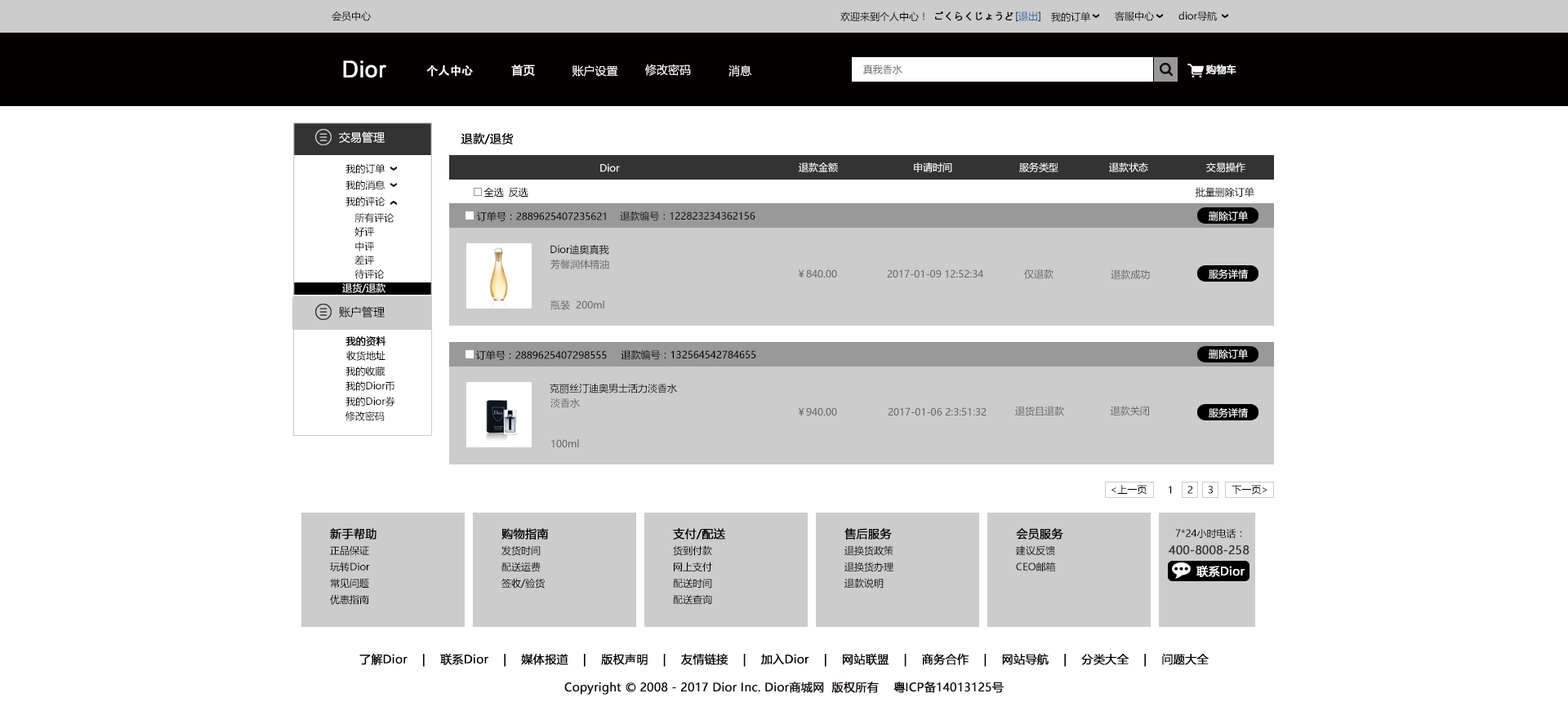
<style>
.page{position:relative;width:1568px;height:702px;background:#ffffff}
.page>*{position:absolute;margin:0}
.t1{font:9.8px "MicrosoftYaHei";color:#040000}
.t2{font:9.8px "MicrosoftYaHei";color:#040000;font-weight:bold}
.t3{font:9.8px "MicrosoftYaHei";color:#2a62ae}
.t4{font:22.9px "ArialMT";color:#ffffff;font-weight:bold}
.t5{font:11.4px "AdobeHeitiStd-Regular";color:#ffffff;font-weight:bold}
.t6{font:11.4px "MicrosoftYaHei";color:#ffffff;font-weight:bold}
.t7{font:11.4px "MicrosoftYaHei";color:#ffffff}
.t8{font:9.8px "MicrosoftYaHei";color:#666666}
.t9{font:9.8px "MicrosoftYaHei";color:#ffffff;font-weight:bold}
.t10{font:11.4px "MicrosoftYaHei";color:#000000;font-weight:bold}
.t11{font:9.8px "MicrosoftYaHei";color:#ffffff}
.t12{font:9.8px "MicrosoftYaHei";color:#000000}
.t13{font:11.4px "MicrosoftYaHei";color:#040000}
.t14{font:9.8px "MicrosoftYaHei";color:#060001;font-weight:bold}
.t15{font:9.8px "MicrosoftYaHei";color:#060001}
.t16{font:11.4px "MicrosoftYaHei";color:#040000;font-weight:bold}
.t17{font:11.4px "MicrosoftYaHei";color:#333333;font-weight:bold}
</style>
<div class="page">
<p class="t1" style="left:332px;top:11px;width:39px;height:10px">会员中心</p>
<p class="t1" style="left:840px;top:11px;width:84px;height:11px">欢迎来到个人中心！</p>
<p class="t2" style="left:935px;top:11px;width:78px;height:10px">ごくらくじょうど</p>
<p class="t3" style="left:1016px;top:11px;width:24px;height:10px"><span class="t1">[</span>退出<span class="t1">]</span></p>
<p class="t1" style="left:1051px;top:11px;width:39px;height:11px">我的订单</p>
<p class="t1" style="left:1115px;top:11px;width:39px;height:10px">客服中心</p>
<p class="t1" style="left:1178px;top:11px;width:39px;height:10px">dior导航</p>
<p class="t4" style="left:343px;top:60px;width:43px;height:18px">Dior</p>
<p class="t5" style="left:426px;top:65px;width:47px;height:12px">个人中心</p>
<p class="t6" style="left:511px;top:65px;width:24px;height:11px">首页</p>
<p class="t7" style="left:572px;top:65px;width:46px;height:12px">账户设置</p>
<p class="t7" style="left:645px;top:64px;width:46px;height:12px">修改密码</p>
<p class="t7" style="left:728px;top:65px;width:24px;height:12px">消息</p>
<p class="t8" style="left:863px;top:65px;width:39px;height:9px">真我香水</p>
<p class="t9" style="left:1205px;top:65px;width:31px;height:10px">购物车</p>
<p class="t7" style="left:339px;top:131px;width:46px;height:12px">交易管理</p>
<p class="t10" style="left:461px;top:133px;width:53px;height:12px">退款/退货</p>
<p class="t1" style="left:345px;top:163px;width:40px;height:11px">我的订单</p>
<p class="t11" style="left:600px;top:163px;width:20px;height:9px">Dior</p>
<p class="t11" style="left:799px;top:163px;width:39px;height:9px">退款金额</p>
<p class="t11" style="left:914px;top:163px;width:38px;height:9px">申请时间</p>
<p class="t11" style="left:1019px;top:163px;width:39px;height:9px">服务类型</p>
<p class="t11" style="left:1109px;top:163px;width:39px;height:9px">退款状态</p>
<p class="t11" style="left:1206px;top:163px;width:39px;height:9px">交易操作</p>
<p class="t1" style="left:345px;top:180px;width:40px;height:10px">我的消息</p>
<p class="t1" style="left:345px;top:197px;width:40px;height:10px">我的评论</p>
<p class="t12" style="left:483px;top:187px;width:21px;height:10px">全选</p>
<p class="t12" style="left:509px;top:187px;width:19px;height:11px">反选</p>
<p class="t12" style="left:1195px;top:187px;width:59px;height:11px">批量删除订单</p>
<p class="t1" style="left:354px;top:213px;width:40px;height:10px">所有评论</p>
<p class="t12" style="left:477px;top:212px;width:129px;height:9px">订单号：2889625407235621</p>
<p class="t12" style="left:620px;top:212px;width:135px;height:9px">退款编号：122823234362156</p>
<p class="t11" style="left:1209px;top:211px;width:39px;height:10px">删除订单</p>
<p class="t1" style="left:354px;top:227px;width:20px;height:10px">好评</p>
<p class="t1" style="left:355px;top:242px;width:19px;height:10px">中评</p>
<p class="t12" style="left:550px;top:245px;width:59px;height:10px">Dior迪奥真我</p>
<p class="t1" style="left:354px;top:255px;width:20px;height:10px">差评</p>
<p class="t1" style="left:354px;top:270px;width:31px;height:9px">待评论</p>
<p class="t8" style="left:550px;top:260px;width:59px;height:10px">芳馨润体精油</p>
<p class="t8" style="left:798px;top:270px;width:39px;height:8px">￥840.00</p>
<p class="t8" style="left:887px;top:270px;width:96px;height:8px">2017-01-09 12:52:34</p>
<p class="t8" style="left:1024px;top:270px;width:30px;height:9px">仅退款</p>
<p class="t8" style="left:1111px;top:270px;width:39px;height:9px">退款成功</p>
<p class="t11" style="left:1209px;top:269px;width:39px;height:10px">服务详情</p>
<p class="t11" style="left:342px;top:283px;width:43px;height:10px">退货/退款</p>
<p class="t8" style="left:550px;top:301px;width:54px;height:9px">瓶装  200ml</p>
<p class="t13" style="left:339px;top:306px;width:46px;height:12px">账户管理</p>
<p class="t14" style="left:345px;top:336px;width:41px;height:10px">我的资料</p>
<p class="t15" style="left:346px;top:351px;width:39px;height:10px">收货地址</p>
<p class="t12" style="left:476px;top:350px;width:131px;height:10px">订单号：2889625407298555</p>
<p class="t12" style="left:621px;top:350px;width:135px;height:10px">退款编号：132564542784655</p>
<p class="t11" style="left:1209px;top:349px;width:39px;height:10px">删除订单</p>
<p class="t15" style="left:345px;top:367px;width:40px;height:9px">我的收藏</p>
<p class="t15" style="left:345px;top:381px;width:49px;height:10px">我的Dior币</p>
<p class="t12" style="left:550px;top:384px;width:127px;height:10px">克丽丝汀迪奥男士活力淡香水</p>
<p class="t15" style="left:345px;top:397px;width:50px;height:10px">我的Dior券</p>
<p class="t8" style="left:550px;top:399px;width:30px;height:9px">淡香水</p>
<p class="t15" style="left:345px;top:412px;width:40px;height:9px">修改密码</p>
<p class="t8" style="left:798px;top:408px;width:39px;height:8px">￥940.00</p>
<p class="t8" style="left:888px;top:408px;width:99px;height:8px">2017-01-06 2:3:51:32</p>
<p class="t8" style="left:1015px;top:406px;width:49px;height:10px">退货且退款</p>
<p class="t8" style="left:1110px;top:406px;width:39px;height:10px">退款关闭</p>
<p class="t11" style="left:1209px;top:408px;width:39px;height:10px">服务详情</p>
<p class="t8" style="left:551px;top:439px;width:28px;height:9px">100ml</p>
<p class="t12" style="left:1111px;top:485px;width:36px;height:10px">&lt;上一页</p>
<p class="t12" style="left:1169px;top:486px;width:3px;height:8px">1</p>
<p class="t12" style="left:1187px;top:486px;width:6px;height:8px">2</p>
<p class="t12" style="left:1208px;top:486px;width:5px;height:8px">3</p>
<p class="t12" style="left:1232px;top:485px;width:35px;height:10px">下一页&gt;</p>
<p class="t16" style="left:330px;top:528px;width:46px;height:12px">新手帮助</p>
<p class="t16" style="left:501px;top:528px;width:48px;height:12px">购物指南</p>
<p class="t16" style="left:673px;top:528px;width:52px;height:12px">支付/配送</p>
<p class="t16" style="left:844px;top:528px;width:48px;height:12px">售后服务</p>
<p class="t16" style="left:1016px;top:528px;width:47px;height:12px">会员服务</p>
<p class="t1" style="left:1175px;top:528px;width:67px;height:11px">7*24小时电话：</p>
<p class="t1" style="left:501px;top:546px;width:40px;height:10px">发货时间</p>
<p class="t1" style="left:673px;top:546px;width:39px;height:10px">货到付款</p>
<p class="t1" style="left:844px;top:546px;width:49px;height:10px">退换货政策</p>
<p class="t1" style="left:1016px;top:546px;width:39px;height:10px">建议反馈</p>
<p class="t17" style="left:1169px;top:546px;width:81px;height:9px">400-8008-258</p>
<p class="t1" style="left:330px;top:546px;width:39px;height:10px">正品保证</p>
<p class="t1" style="left:330px;top:562px;width:40px;height:10px">玩转Dior</p>
<p class="t1" style="left:501px;top:562px;width:40px;height:10px">配送运费</p>
<p class="t1" style="left:674px;top:562px;width:38px;height:10px">网上支付</p>
<p class="t1" style="left:844px;top:562px;width:49px;height:10px">退换货办理</p>
<p class="t1" style="left:1016px;top:562px;width:40px;height:10px">CEO邮箱</p>
<p class="t6" style="left:1196px;top:566px;width:49px;height:11px">联系Dior</p>
<p class="t1" style="left:330px;top:578px;width:39px;height:11px">常见问题</p>
<p class="t1" style="left:501px;top:578px;width:44px;height:11px">签收/验货</p>
<p class="t1" style="left:673px;top:578px;width:39px;height:11px">配送时间</p>
<p class="t1" style="left:844px;top:578px;width:40px;height:11px">退款说明</p>
<p class="t1" style="left:330px;top:595px;width:39px;height:10px">优惠指南</p>
<p class="t1" style="left:673px;top:595px;width:39px;height:9px">配送查询</p>
<p class="t16" style="left:359px;top:653px;width:850px;height:14px">了解Dior    |    联系Dior    |    媒体报道    |    版权声明    |    友情链接    |    加入Dior    |    网站联盟    |    商务合作    |    网站导航    |    分类大全    |    问题大全</p>
<p class="t10" style="left:564px;top:681px;width:440px;height:14px">Copyright © 2008 - 2017 Dior Inc. Dior商城网  版权所有    粤ICP备14013125号</p>
</div>
